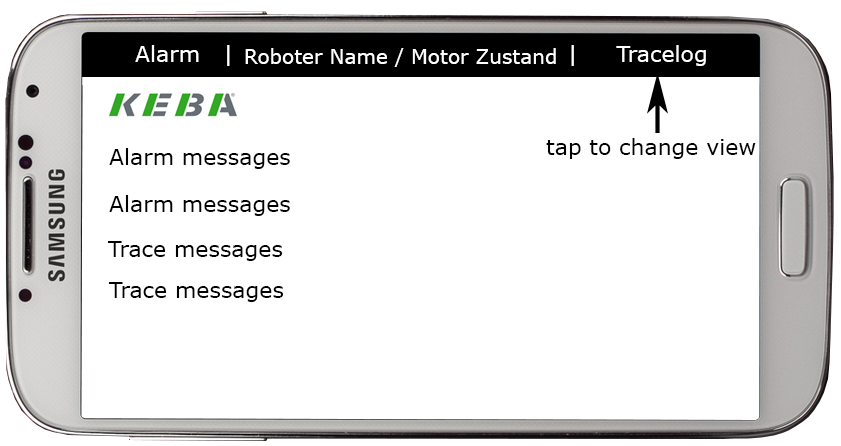
<style>
.page{position:relative;width:841px;height:446px;background:#ffffff}
.page>*{position:absolute;margin:0}
.t1{font:22px "Verdana";color:#ffffff}
.t2{font:20px "Verdana";color:#ffffff}
.t3{font:22px "Verdana";color:#000000}
</style>
<div class="page">
<p class="t1" style="left:135px;top:45px;width:95px;height:21px">Alarm   |</p>
<p class="t2" style="left:245px;top:48px;width:311px;height:19px">Roboter Name / Motor Zustand</p>
<p class="t1" style="left:571px;top:45px;width:135px;height:21px">|     Tracelog</p>
<p class="t3" style="left:109px;top:148px;width:181px;height:21px">Alarm messages</p>
<p class="t3" style="left:546px;top:138px;width:210px;height:21px">tap to change view</p>
<p class="t3" style="left:109px;top:195px;width:181px;height:21px">Alarm messages</p>
<p class="t3" style="left:107px;top:241px;width:176px;height:20px">Trace messages</p>
<p class="t3" style="left:108px;top:282px;width:176px;height:20px">Trace messages</p>
</div>
